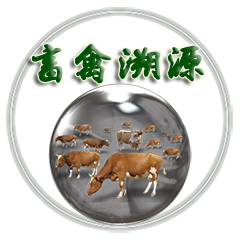
<style>
.page{position:relative;width:240px;height:240px;background:#ffffff}
.page>*{position:absolute;margin:0}
.t1{font:45px "SunYatsenHsingshu-";color:#035103;font-weight:bold}
</style>
<div class="page">
<p class="t1" style="left:31px;top:43px;width:173px;height:41px">畜禽溯源</p>
</div>
